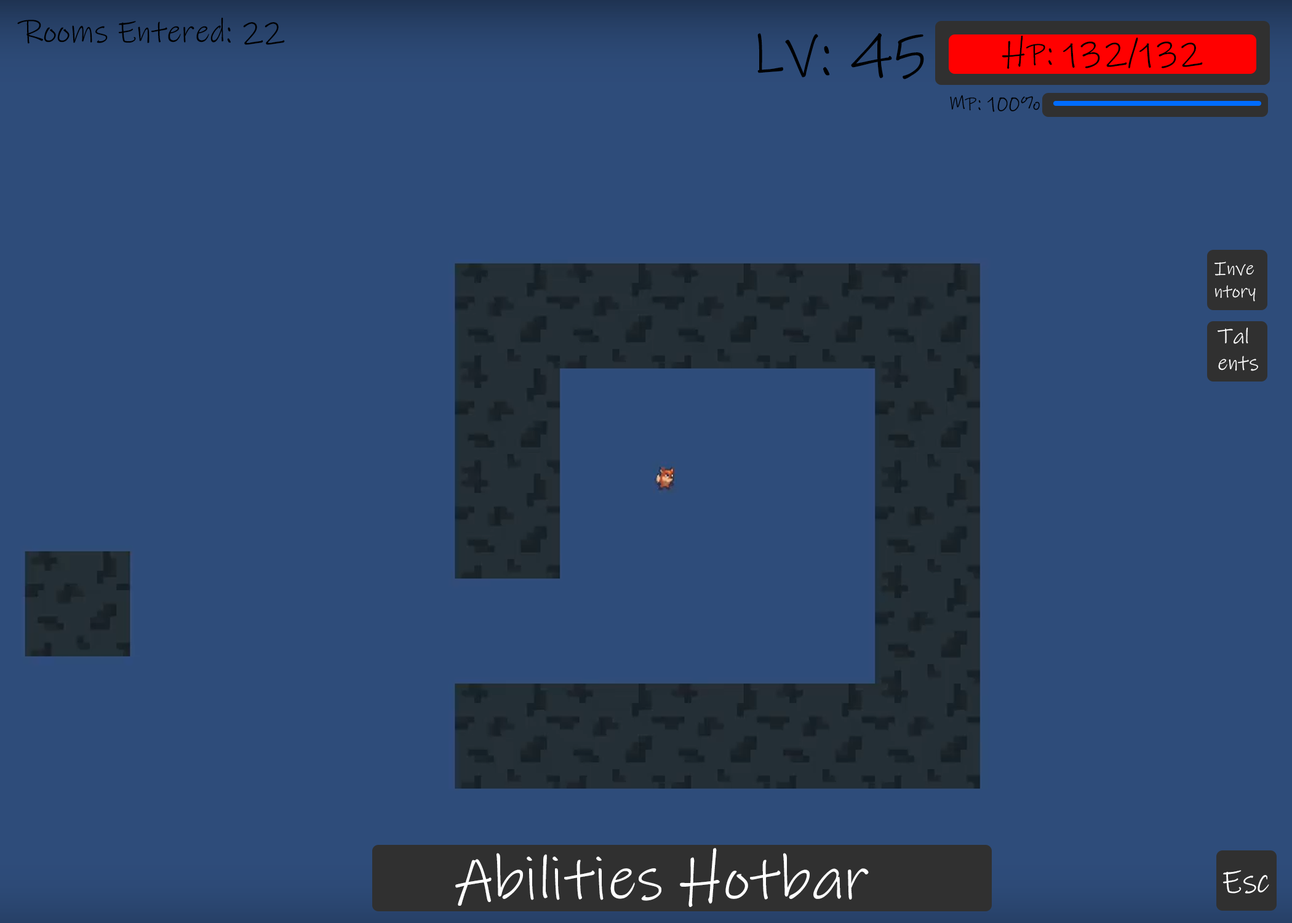
<style>
.page{position:relative;width:1292px;height:923px;background:#2e4c7a}
.page>*{position:absolute;margin:0}
.t1{font:32px "InkFree";color:#000000}
.t2{font:61.5px "InkFree";color:#000000}
.t3{font:34.8px "InkFree";color:#000000}
.t4{font:20.8px "InkFree";color:#010101}
.t5{font:18.9px "InkFree";color:#ffffff}
.t6{font:22px "InkFree";color:#ffffff}
.t7{font:61.5px "InkFree";color:#ffffff}
.t8{font:33.7px "InkFree";color:#ffffff}
</style>
<div class="page">
<p class="t1" style="left:17px;top:17px;width:268px;height:28px">Rooms Entered: 22</p>
<p class="t2" style="left:757px;top:33px;width:167px;height:46px">LV: 45</p>
<p class="t3" style="left:1002px;top:35px;width:201px;height:34px">HP: 132/132</p>
<p class="t4" style="left:950px;top:95px;width:90px;height:17px">MP: 100%</p>
<p class="t5" style="left:1215px;top:261px;width:41px;height:40px">Inve<br>ntory</p>
<p class="t6" style="left:1218px;top:327px;width:40px;height:44px">Tal<br>ents</p>
<p class="t7" style="left:455px;top:848px;width:414px;height:59px">Abilities Hotbar</p>
<p class="t8" style="left:1223px;top:870px;width:46px;height:23px">Esc</p>
</div>
